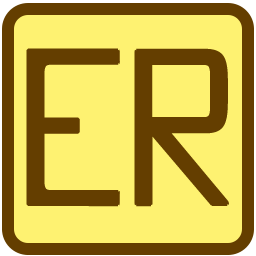
<style>
.page{position:relative;width:256px;height:256px;background:#fef271}
.page>*{position:absolute;margin:0}
.t1{font:230px "Halkyer8";color:#643e00;font-weight:bold}
</style>
<div class="page">
<p class="t1" style="left:26px;top:48px;width:203px;height:159px">ER</p>
</div>
